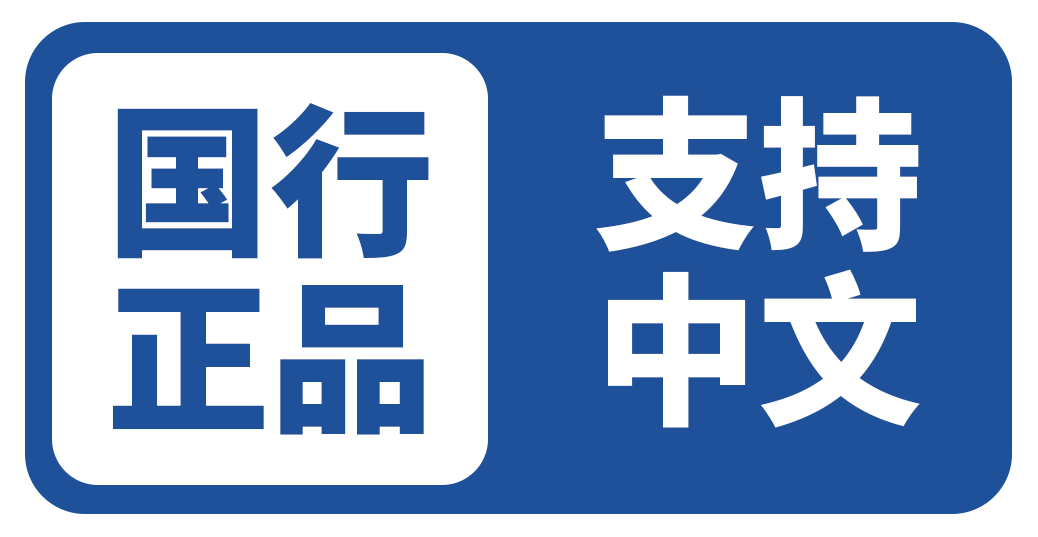
<style>
.page{position:relative;width:1038px;height:537px;background:#1f519a}
.page>*{position:absolute;margin:0}
.t1{font:164px/176px "SourceHanSansCN-Heavy";color:#1f519a}
.t2{font:164px/176px "SourceHanSansCN-Heavy";color:#ffffff}
</style>
<div class="page">
<p class="t1" style="left:112px;top:102px;width:317px;height:333px">国行<br>正品</p>
<p class="t2" style="left:596px;top:95px;width:324px;height:333px">支持<br>中文</p>
</div>
